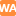
<style>
.page{position:relative;width:16px;height:16px;background:#ff8c39}
.page>*{position:absolute;margin:0}
.t1{font:11.2px "HelveticaNeue-Bold";color:#ffffff;font-variant:small-caps;scale:1.11 1}
</style>
<div class="page">
<p class="t1" style="left:0px;top:4px;width:18px;height:8px">WA</p>
</div>
